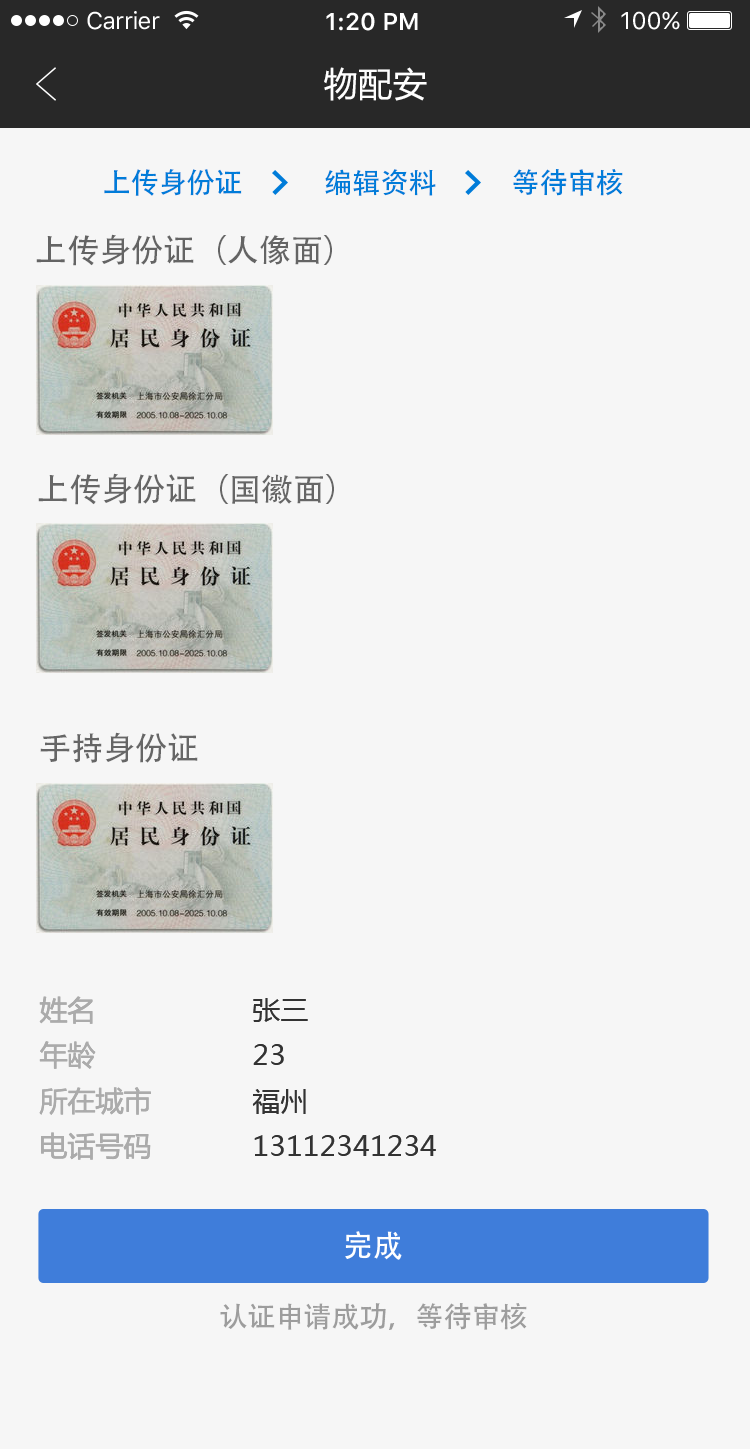
<style>
.page{position:relative;width:750px;height:1449px;background:#f6f6f6}
.page>*{position:absolute;margin:0}
.t1{font:24px "SFUIText-Regular";letter-spacing:-0.025em;color:#ffffff}
.t2{font:24px "SFUIText-Semibold";color:#ffffff}
.t3{font:24px "SFUIText-Regular";color:#ffffff}
.t4{font:34px "MicrosoftYaHei";letter-spacing:0.02em;color:#ffffff}
.t5{font:28px "AdobeHeitiStd-Regular";color:#007cd9}
.t6{font:32px "AdobeHeitiStd-Regular";color:#646464}
.t7{font:32px "AdobeHeitiStd-Regular";color:#666666}
.t8{font:28px/50.7px "MicrosoftYaHei";color:#ababab}
.t9{font:28px/50.7px "MicrosoftYaHei";color:#333333}
.t10{font:30px "AdobeHeitiStd-Regular";letter-spacing:0.02em;color:#ffffff}
.t11{font:28px "AdobeHeitiStd-Regular";color:#9d9d9d}
</style>
<div class="page">
<p class="t1" style="left:87px;top:11px;width:73px;height:19px">Carrier</p>
<p class="t2" style="left:326px;top:12px;width:92px;height:19px">1:20 PM</p>
<p class="t3" style="left:621px;top:11px;width:59px;height:19px">100%</p>
<p class="t4" style="left:324px;top:67px;width:103px;height:34px">物配安</p>
<p class="t5" style="left:104px;top:169px;width:138px;height:27px">上传身份证</p>
<p class="t5" style="left:325px;top:169px;width:111px;height:27px">编辑资料</p>
<p class="t5" style="left:513px;top:169px;width:110px;height:27px">等待审核</p>
<p class="t6" style="left:36px;top:234px;width:296px;height:32px">上传身份证（人像面）</p>
<p class="t7" style="left:38px;top:473px;width:296px;height:32px">上传身份证（国徽面）</p>
<p class="t7" style="left:40px;top:732px;width:158px;height:31px">手持身份证</p>
<p class="t8" style="left:39px;top:996px;width:112px;height:164px">姓名<br>年龄<br>所在城市<br>电话号码</p>
<p class="t9" style="left:252px;top:998px;width:184px;height:158px">张三<br>23<br>福州<br>13112341234</p>
<p class="t10" style="left:345px;top:1231px;width:57px;height:29px">完成</p>
<p class="t11" style="left:220px;top:1303px;width:307px;height:27px">认证申请成功，等待审核</p>
</div>
